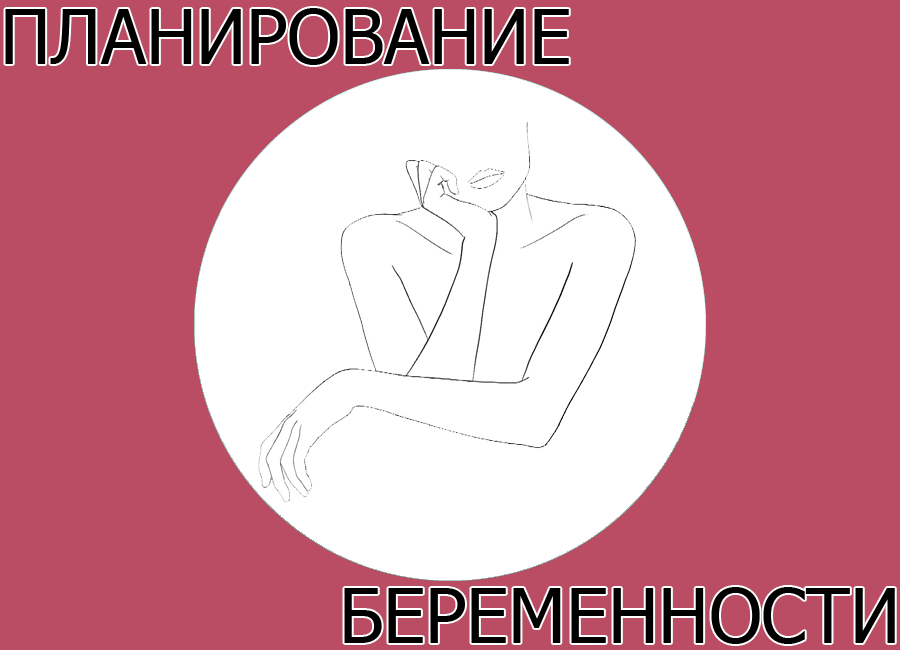
<style>
.page{position:relative;width:900px;height:650px;background:#ba4c63}
.page>*{position:absolute;margin:0}
.t1{font:74.7px "Tahoma";color:#000000}
</style>
<div class="page">
<p class="t1" style="left:5px;top:8px;width:564px;height:57px">ПЛАНИРОВАНИЕ</p>
<p class="t1" style="left:344px;top:587px;width:551px;height:57px">БЕРЕМЕННОСТИ</p>
</div>
